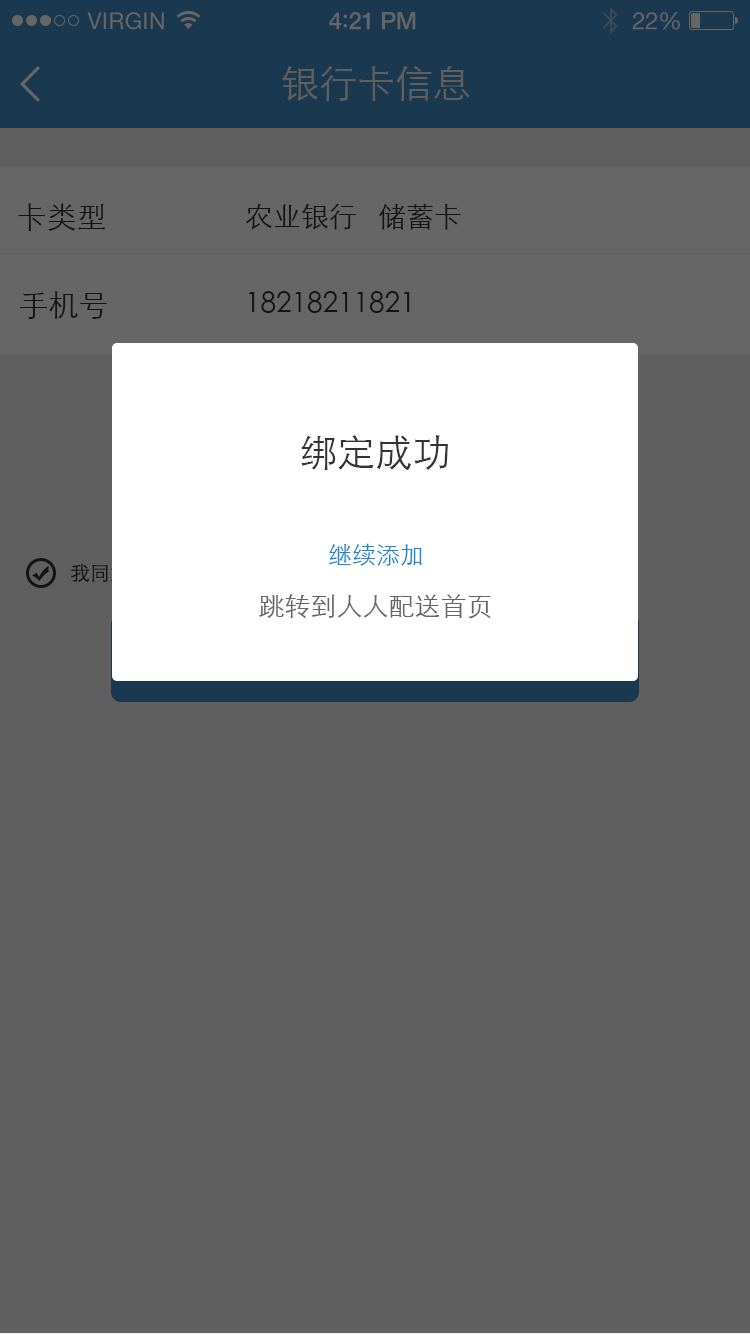
<style>
.page{position:relative;width:750px;height:1334px;background:#5f5f5f}
.page>*{position:absolute;margin:0}
.t1{font:23px "HelveticaNeue";letter-spacing:0.02em;color:#666666}
.t2{font:24px "HelveticaNeue-Medium";letter-spacing:-0.02em;color:#666666}
.t3{font:26px "Avenir-Medium";letter-spacing:-0.02em;color:#666666}
.t4{font:24px "HelveticaNeue";letter-spacing:-0.02em;color:#666666}
.t5{font:38px "STXihei";color:#5f5f5f}
.t6{font:30px "STXihei";color:#141414}
.t7{font:28px "STXihei";color:#141414}
.t8{font:38px "STXihei";color:#333333}
.t9{font:24px "STXihei";color:#1686d5}
.t10{font:26px "STXihei";color:#666666}
</style>
<div class="page">
<p class="t1" style="left:87px;top:12px;width:77px;height:18px">VIRGIN</p>
<p class="t2" style="left:329px;top:12px;width:87px;height:18px">4<span class="t3">:</span>21 PM</p>
<p class="t4" style="left:632px;top:12px;width:48px;height:18px">22%</p>
<p class="t5" style="left:282px;top:65px;width:188px;height:36px">银行卡信息</p>
<p class="t6" style="left:18px;top:203px;width:87px;height:28px">卡类型</p>
<p class="t7" style="left:245px;top:203px;width:216px;height:27px">农业银行   储蓄卡</p>
<p class="t6" style="left:20px;top:291px;width:87px;height:28px">手机号</p>
<p class="t7" style="left:249px;top:291px;width:161px;height:22px">18218211821</p>
<p class="t8" style="left:301px;top:435px;width:147px;height:35px">绑定成功</p>
<p class="t9" style="left:329px;top:543px;width:93px;height:23px">继续添加</p>
<p class="t10" style="left:259px;top:594px;width:232px;height:25px">跳转到人人配送首页</p>
</div>
